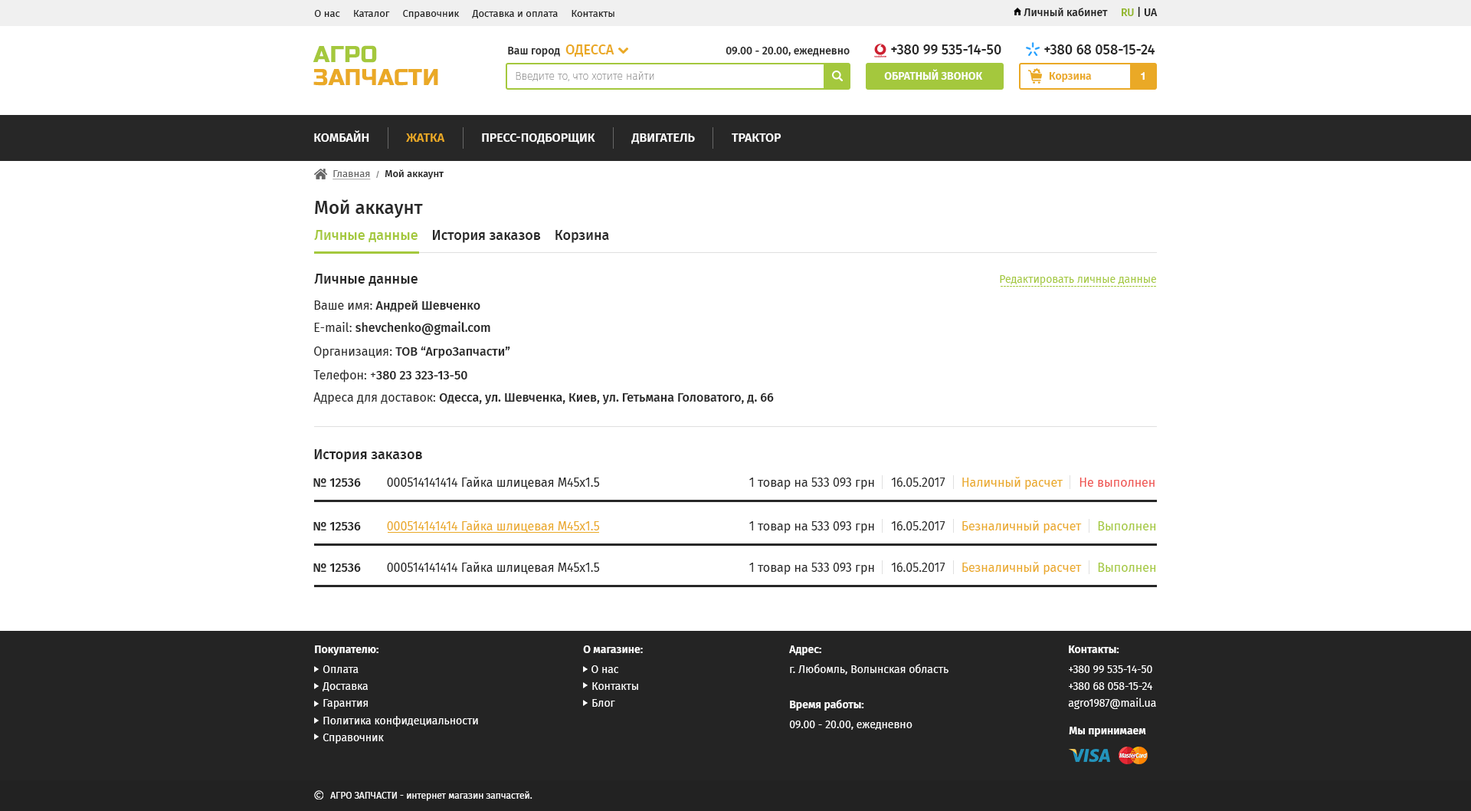
<style>
.page{position:relative;width:1471px;height:811px;background:#ffffff}
.page>*{position:absolute;margin:0}
.t1{font:10px "FiraSans-Regular";color:#212121}
.t2{font:10.7px "FiraSans-Medium";color:#212121}
.t3{font:10.7px "FiraSans-Medium";color:#91b627}
.t4{font:23px/23px "RussoOne-Regular";color:#eaa926;text-transform:uppercase}
.t5{font:23px/23px "RussoOne-Regular";color:#a4c83d;text-transform:uppercase}
.t6{font:10.7px "FiraSans-Medium";color:#272727}
.t7{font:13.8px "FiraSans-Medium";color:#eaa926}
.t8{font:13.8px "FiraSans-Medium";color:#272727}
.t9{font:10.7px "FiraSans-Thin";color:#777777}
.t10{font:10.7px "FiraSans-SemiBold";color:#ffffff;text-transform:uppercase}
.t11{font:10.7px "FiraSans-SemiBold";color:#eaa926}
.t12{font:10.7px "HelveticaNeueCyr-Bold";color:#ffffff}
.t13{font:12.3px "FiraSans-Medium";color:#ffffff;text-transform:uppercase}
.t14{font:12.3px "FiraSans-Medium";color:#eaa926;text-transform:uppercase}
.t15{font:10px "FiraSans-Medium";color:#212121}
.t16{font:10px "FiraSans-Regular";color:#676767;text-decoration:underline}
.t17{font:7.7px "FiraSans-Regular";color:#676767}
.t18{font:18.4px "FiraSans-Medium";color:#282828}
.t19{font:13.8px "FiraSans-Medium";color:#a4c83d}
.t20{font:10.7px "FiraSans-Regular";color:#a4c83d}
.t21{font:12.3px "FiraSans-Medium";color:#282828}
.t22{font:12.3px "FiraSans-Regular";color:#282828}
.t23{font:12.3px "FiraSans-Regular";color:#212121}
.t24{font:12.3px "FiraSans-Regular";color:#272727}
.t25{font:12.3px "FiraSans-Regular";color:#eaa926}
.t26{font:12.3px "FiraSans-Regular";color:#ef5350}
.t27{font:12.3px "FiraSans-Regular";color:#a4c83d}
.t28{font:10.7px/16.9px "FiraSans-Regular";color:#ffffff}
.t29{font:10.7px/19.9px "FiraSans-SemiBold";color:#ffffff}
.t30{font:10.7px/19.9px "FiraSans-Regular";color:#ffffff}
.t31{font:10.7px "FiraSans-SemiBold";color:#ffffff}
.t32{font:9.2px "FiraSans-Regular";color:#ffffff}
</style>
<div class="page">
<p class="t1" style="left:314px;top:10px;width:300px;height:9px">О нас     Каталог     Справочник     Доставка и оплата     Контакты</p>
<p class="t2" style="left:1024px;top:7px;width:134px;height:10px">Личный кабинет     <span class="t3">RU</span> | UA</p>
<p class="t4" style="left:313px;top:45px;width:125px;height:41px"><span class="t5">АГРО<br></span>ЗАПЧАСТИ</p>
<p class="t6" style="left:508px;top:44px;width:106px;height:13px">Ваш город  <span class="t7">ОДЕССА</span></p>
<p class="t6" style="left:726px;top:47px;width:124px;height:10px">09.00 - 20.00, ежедневно</p>
<p class="t8" style="left:891px;top:44px;width:110px;height:10px">+380 99 535-14-50</p>
<p class="t8" style="left:1044px;top:44px;width:111px;height:10px">+380 68 058-15-24</p>
<p class="t9" style="left:516px;top:71px;width:138px;height:10px">Введите то, что хотите найти</p>
<p class="t10" style="left:884px;top:69px;width:99px;height:11px">Обратный звонок</p>
<p class="t11" style="left:1049px;top:72px;width:43px;height:10px">Корзина</p>
<p class="t12" style="left:1141px;top:72px;width:4px;height:8px">1</p>
<p class="t13" style="left:314px;top:130px;width:467px;height:14px">КОМБАЙН            <span class="t14">ЖАТКА            </span>ПРЕСС-ПОДБОРЩИК            ДВИГАТЕЛЬ            трактор</p>
<p class="t15" style="left:333px;top:169px;width:111px;height:11px"><span class="t16">Главная  </span><span class="t17">/  </span>Мой аккаунт</p>
<p class="t18" style="left:315px;top:199px;width:108px;height:19px">Мой аккаунт</p>
<p class="t8" style="left:314px;top:230px;width:295px;height:13px"><span class="t19">Личные данные    </span>История заказов    Корзина</p>
<p class="t8" style="left:314px;top:274px;width:104px;height:12px">Личные данные</p>
<p class="t20" style="left:1000px;top:275px;width:156px;height:10px">Редактировать личные данные</p>
<p class="t21" style="left:314px;top:300px;width:166px;height:13px"><span class="t22">Ваше имя: </span>Андрей Шевченко</p>
<p class="t21" style="left:314px;top:321px;width:176px;height:14px"><span class="t22">E-mail: </span>shevchenko@gmail.com</p>
<p class="t21" style="left:314px;top:346px;width:196px;height:13px"><span class="t22">Организация: </span>ТОВ “АгроЗапчасти”</p>
<p class="t21" style="left:313px;top:369px;width:154px;height:13px"><span class="t22">Телефон: +</span>380 23 323-13-50</p>
<p class="t21" style="left:313px;top:392px;width:461px;height:13px"><span class="t22">Адреса для доставок: </span>Одесса, ул. Шевченка, Киев, ул. Гетьмана Головатого, д. 66</p>
<p class="t8" style="left:314px;top:449px;width:108px;height:13px">История заказов</p>
<p class="t23" style="left:313px;top:477px;width:842px;height:13px"><span class="t21">№ 12536        </span>000514141414 Гайка шлицевая М45x1.5 <span class="t24">                                             1 товар на </span><span class="t24">533 093 </span><span class="t24">грн     </span><span class="t24">16.05.2017     </span><span class="t25">Наличный расчет     </span><span class="t26">Не выполнен</span></p>
<p class="t25" style="left:313px;top:520px;width:843px;height:13px"><span class="t21">№ 12536        </span>000514141414 Гайка шлицевая М45x1.5 <span class="t24">                                             1 товар на </span><span class="t24">533 093 </span><span class="t24">грн     </span><span class="t24">16.05.2017     </span>Безналичный расчет     <span class="t27">Выполнен</span></p>
<p class="t23" style="left:313px;top:562px;width:843px;height:13px"><span class="t21">№ 12536        </span>000514141414 Гайка шлицевая М45x1.5 <span class="t24">                                             1 товар на </span><span class="t24">533 093 </span><span class="t24">грн     </span><span class="t24">16.05.2017     </span><span class="t25">Безналичный расчет     </span><span class="t27">Выполнен</span></p>
<p class="t28" style="left:315px;top:645px;width:163px;height:98px"><span class="t29">Покупателю:<br></span><span class="t30">   Оплата<br></span>   Доставка<br>   Гарантия<br>   Политика конфидециальности<br>   Справочник</p>
<p class="t28" style="left:583px;top:645px;width:60px;height:61px"><span class="t29">О магазине:<br>   </span><span class="t30">О нас<br></span>   Контакты<br>   Блог</p>
<p class="t30" style="left:789px;top:645px;width:160px;height:29px"><span class="t29">Адрес:<br></span>г. Любомль, Волынская область</p>
<p class="t28" style="left:1068px;top:645px;width:88px;height:64px"><span class="t29">Контакты:<br></span><span class="t30">+380 99 535-14-50<br></span>+380 68 058-15-24<br>agro1987@mail.ua</p>
<p class="t30" style="left:789px;top:699px;width:124px;height:30px"><span class="t29">Время работы:<br></span>09.00 - 20.00, ежедневно</p>
<p class="t31" style="left:1069px;top:726px;width:77px;height:10px">Мы принимаем</p>
<p class="t32" style="left:330px;top:791px;width:202px;height:10px">АГРО ЗАПЧАСТИ - интернет магазин запчастей.</p>
</div>
